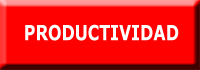
<style>
.page{position:relative;width:200px;height:70px;background:#ff0000}
.page>*{position:absolute;margin:0}
.t1{font:21px "Verdana-Bold";color:#ffffff;scale:0.76 1}
</style>
<div class="page">
<p class="t1" style="left:25px;top:24px;width:154px;height:17px">PRODUCTIVIDAD</p>
</div>
